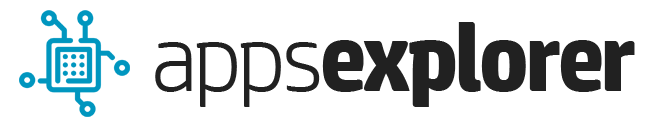
<style>
.page{position:relative;width:669px;height:128px;background:#ffffff}
.page>*{position:absolute;margin:0}
.t1{font:96.3px "HPSimplified-Bold";letter-spacing:-0.051em;color:#212121}
.t2{font:96.3px "HPSimplified-Light";letter-spacing:-0.051em;color:#212121}
</style>
<div class="page">
<p class="t1" style="left:155px;top:22px;width:480px;height:85px"><span class="t2">apps</span>explorer</p>
</div>
